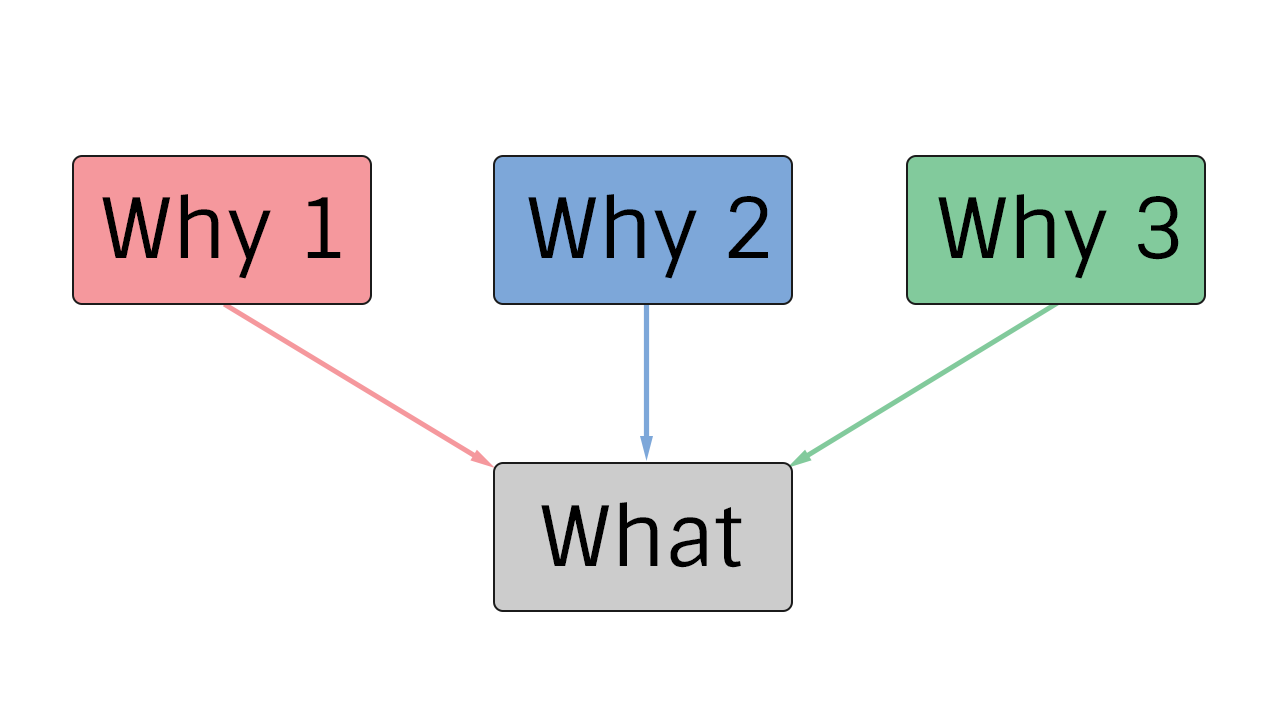
<style>
.page{position:relative;width:1280px;height:720px;background:#ffffff}
.page>*{position:absolute;margin:0}
.t1{font:83.3px "Sintony";color:#000000}
</style>
<div class="page">
<p class="t1" style="left:102px;top:194px;width:239px;height:85px">Why 1</p>
<p class="t1" style="left:528px;top:194px;width:240px;height:85px">Why 2</p>
<p class="t1" style="left:938px;top:194px;width:241px;height:85px">Why 3</p>
<p class="t1" style="left:541px;top:502px;width:201px;height:66px">What</p>
</div>
